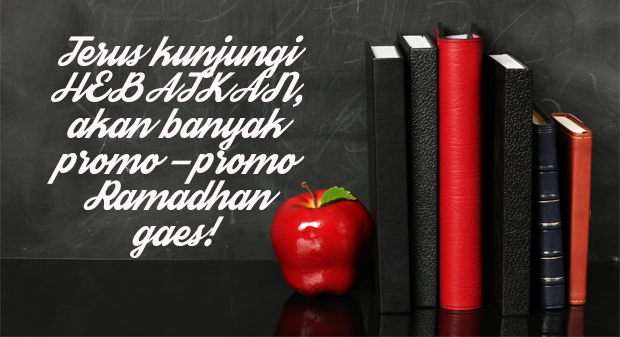
<style>
.page{position:relative;width:620px;height:337px}
.page>*{position:absolute;margin:0}
.t1{font:30px "Streetwear";color:#fbf7f8}
</style>
<div class="page">
<p class="t1" style="left:47px;top:35px;width:259px;height:223px;text-align:center">Terus kunjungi<br>HEBATKAN,<br>akan banyak<br>promo -promo<br>Ramadhan<br>gaes!</p>
</div>
